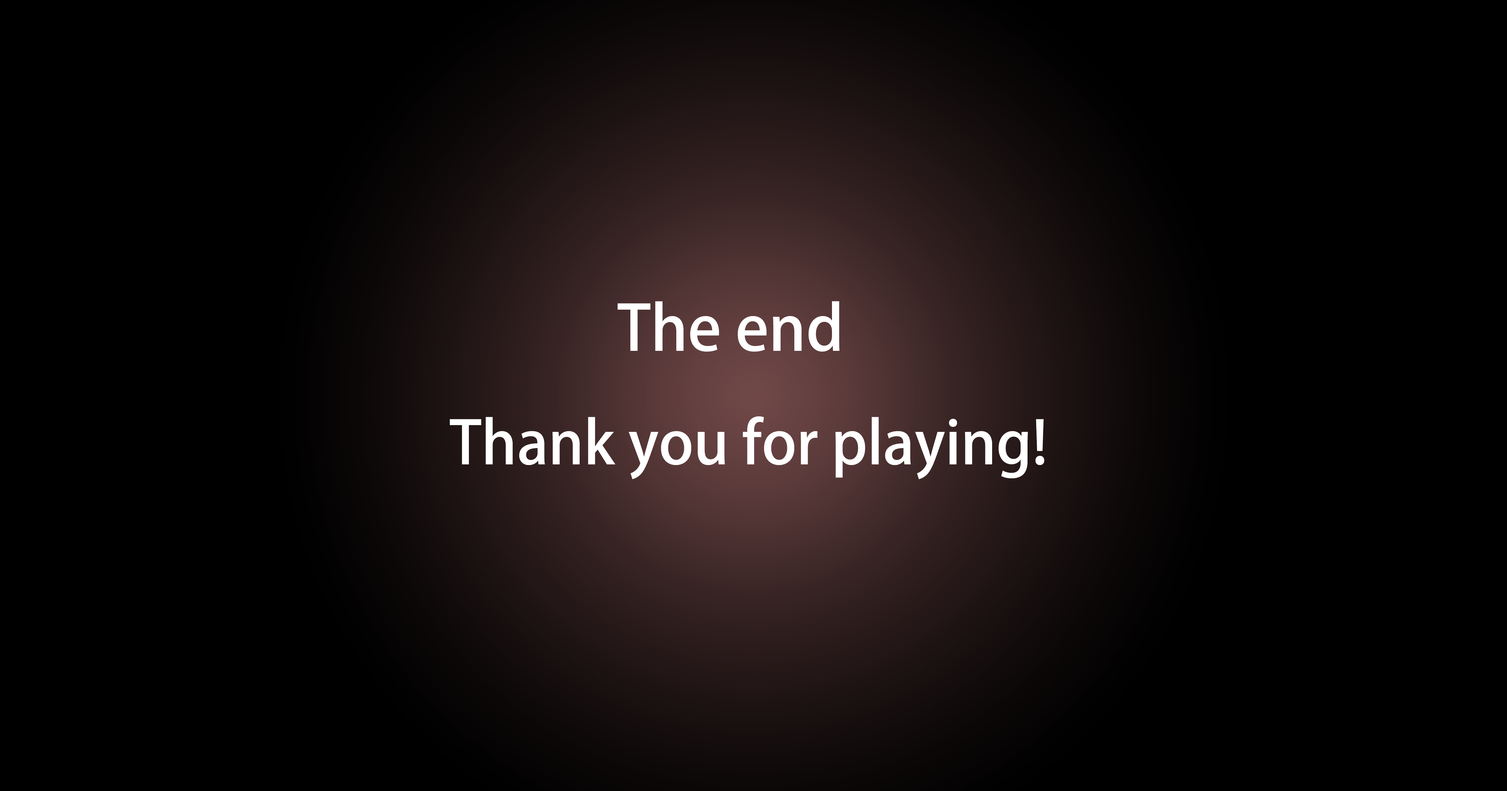
<style>
.page{position:relative;width:1507px;height:791px;background:#000000}
.page>*{position:absolute;margin:0}
.t1{font:61.8px "AdobeHeitiStd-Regular";color:#ffffff}
.t2{font:59.1px "AdobeHeitiStd-Regular";color:#ffffff}
</style>
<div class="page">
<p class="t1" style="left:618px;top:301px;width:222px;height:51px">The end</p>
<p class="t2" style="left:450px;top:416px;width:595px;height:64px">Thank you for playing!</p>
</div>
